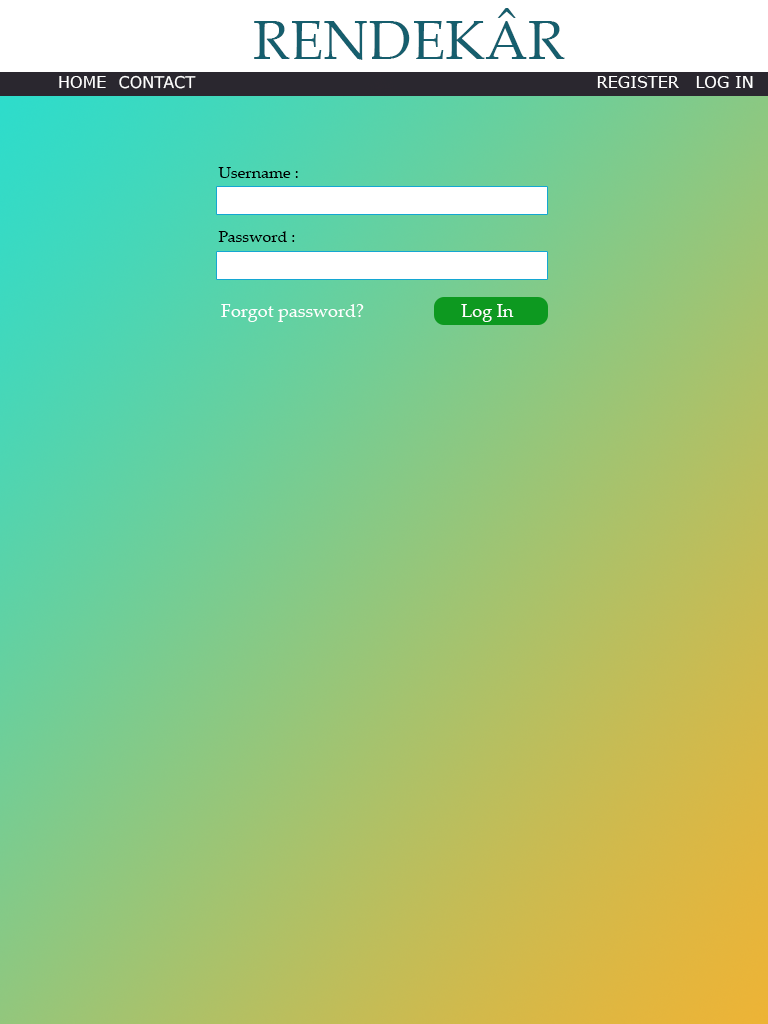
<style>
.page{position:relative;width:768px;height:1024px}
.page>*{position:absolute;margin:0}
.t1{font:55px "PalatinoLinotype-Roman";color:#165e6d}
.t2{font:16px "Verdana";color:#ffffff}
.t3{font:16px "PalatinoLinotype-Roman";color:#000000}
.t4{font:18px "PalatinoLinotype-Roman";color:#ffffff}
</style>
<div class="page">
<p class="t1" style="left:254px;top:8px;width:311px;height:52px">RENDEKÂR</p>
<p class="t2" style="left:59px;top:76px;width:47px;height:12px">HOME</p>
<p class="t2" style="left:119px;top:75px;width:77px;height:14px">CONTACT</p>
<p class="t2" style="left:597px;top:76px;width:82px;height:12px">REGISTER</p>
<p class="t2" style="left:696px;top:76px;width:57px;height:12px">LOG IN</p>
<p class="t3" style="left:218px;top:167px;width:80px;height:11px">Username :</p>
<p class="t3" style="left:218px;top:231px;width:77px;height:11px">Password :</p>
<p class="t4" style="left:221px;top:304px;width:143px;height:18px">Forgot password?</p>
<p class="t4" style="left:461px;top:304px;width:53px;height:18px">Log In</p>
</div>
